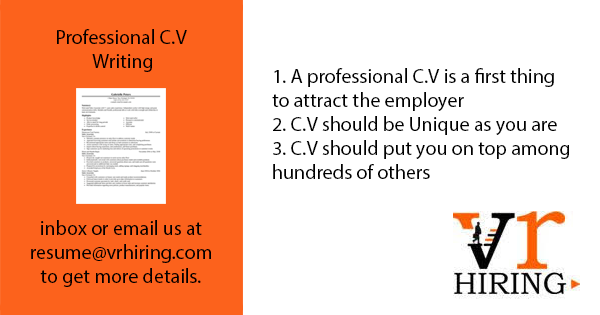
<style>
.page{position:relative;width:600px;height:315px;background:#ffffff}
.page>*{position:absolute;margin:0}
.t1{font:20px "MyriadPro-Regular";color:#000000}
</style>
<div class="page">
<p class="t1" style="left:57px;top:29px;width:130px;height:43px;text-align:center">Professional C.V <br>Writing</p>
<p class="t1" style="left:272px;top:68px;width:297px;height:111px">1. A professional C.V is a first thing<br>to attract the employer<br>2. C.V should be Unique as you are<br>3. C.V should put you on top among <br>hundreds of others</p>
<p class="t1" style="left:31px;top:220px;width:180px;height:67px;text-align:center">inbox or email us at<br>resume@vrhiring.com<br>to get more details.</p>
</div>
